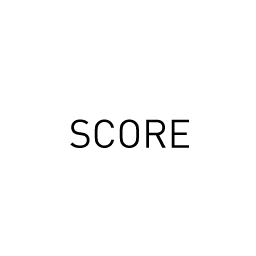
<style>
.page{position:relative;width:256px;height:256px;background:#ffffff}
.page>*{position:absolute;margin:0}
.t1{font:39.2px "DIN-Regular";color:#000000}
</style>
<div class="page">
<p class="t1" style="left:70px;top:119px;width:119px;height:29px">SCORE</p>
</div>
